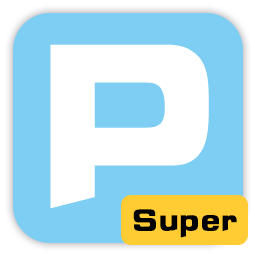
<style>
.page{position:relative;width:256px;height:256px;background:#7ecef4}
.page>*{position:absolute;margin:0}
.t1{font:240px "HYk2gj";color:#ffffff}
.t2{font:32px "HYk2gj";color:#000000}
</style>
<div class="page">
<p class="t1" style="left:50px;top:44px;width:159px;height:165px">P</p>
<p class="t2" style="left:133px;top:209px;width:104px;height:29px">Super</p>
</div>
